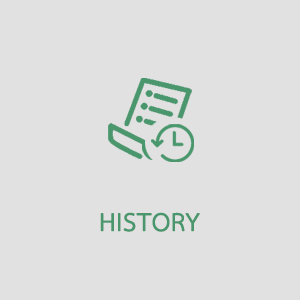
<style>
.page{position:relative;width:300px;height:300px;background:#e1e1e1}
.page>*{position:absolute;margin:0}
.t1{font:36px "THSarabunPSK";letter-spacing:0.01em;color:#4a976d;font-weight:bold}
</style>
<div class="page">
<p class="t1" style="left:100px;top:212px;width:100px;height:20px">HISTORY</p>
</div>
